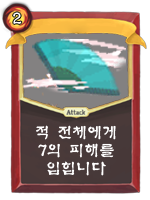
<style>
.page{position:relative;width:150px;height:200px;background:#ffffff}
.page>*{position:absolute;margin:0}
.t1{font:15px "MDSol";color:#ffffff}
</style>
<div class="page">
<p class="t1" style="left:13px;top:12px;width:9px;height:12px">2</p>
<p class="t1" style="left:36px;top:125px;width:80px;height:51px;text-align:center">적 전체에게<br>7의 피해를<br>입힙니다</p>
</div>
